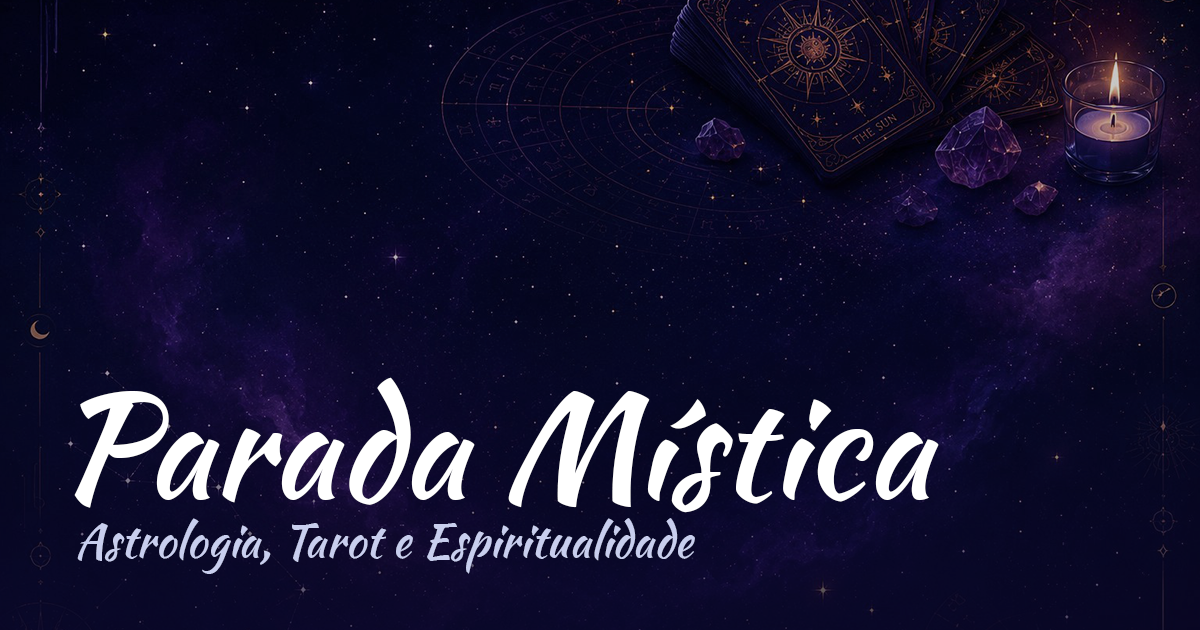
<style>
.page{position:relative;width:1200px;height:630px}
.page>*{position:absolute;margin:0}
.t1{font:144px "KaushanScript-Regular";color:#ffffff}
.t2{font:46.4px "KaushanScript-Regular";color:#c8ceee}
</style>
<div class="page">
<p class="t1" style="left:74px;top:377px;width:865px;height:136px">Parada Mística</p>
<p class="t2" style="left:77px;top:518px;width:618px;height:56px">Astrologia, Tarot e Espiritualidade</p>
</div>
